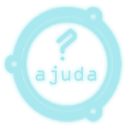
<style>
.page{position:relative;width:128px;height:128px;background:#ffffff}
.page>*{position:absolute;margin:0}
.t1{font:40.9px "OCRAStd";color:#a8e8ee}
.t2{font:21.4px "OCRAExtended";color:#a8e8ee}
</style>
<div class="page">
<p class="t1" style="left:56px;top:28px;width:21px;height:33px">?</p>
<p class="t2" style="left:35px;top:65px;width:62px;height:20px">ajuda</p>
</div>
